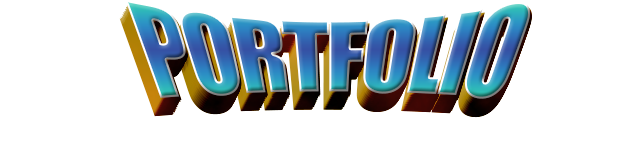
<style>
.page{position:relative;width:640px;height:160px;background:#ffffff}
.page>*{position:absolute;margin:0}
.t1{font:124.8px "Impact";letter-spacing:-0.04em;scale:0.77 1}
</style>
<div class="page">
<p class="t1" style="left:125px;top:6px;width:406px;height:100px">PORTFOLIO</p>
<p class="t1" style="left:125px;top:0px;width:405px;height:99px">PORTFOLIO</p>
<p class="t1" style="left:127px;top:5px;width:405px;height:99px">PORTFOLIO</p>
<p class="t1" style="left:127px;top:3px;width:405px;height:99px">PORTFOLIO</p>
<p class="t1" style="left:120px;top:17px;width:405px;height:100px">PORTFOLIO</p>
<p class="t1" style="left:121px;top:16px;width:405px;height:99px">PORTFOLIO</p>
<p class="t1" style="left:122px;top:14px;width:406px;height:99px">PORTFOLIO</p>
<p class="t1" style="left:123px;top:12px;width:405px;height:99px">PORTFOLIO</p>
<p class="t1" style="left:124px;top:10px;width:405px;height:100px">PORTFOLIO</p>
<p class="t1" style="left:125px;top:8px;width:405px;height:100px">PORTFOLIO</p>
<p class="t1" style="left:119px;top:18px;width:406px;height:100px">PORTFOLIO</p>
</div>
